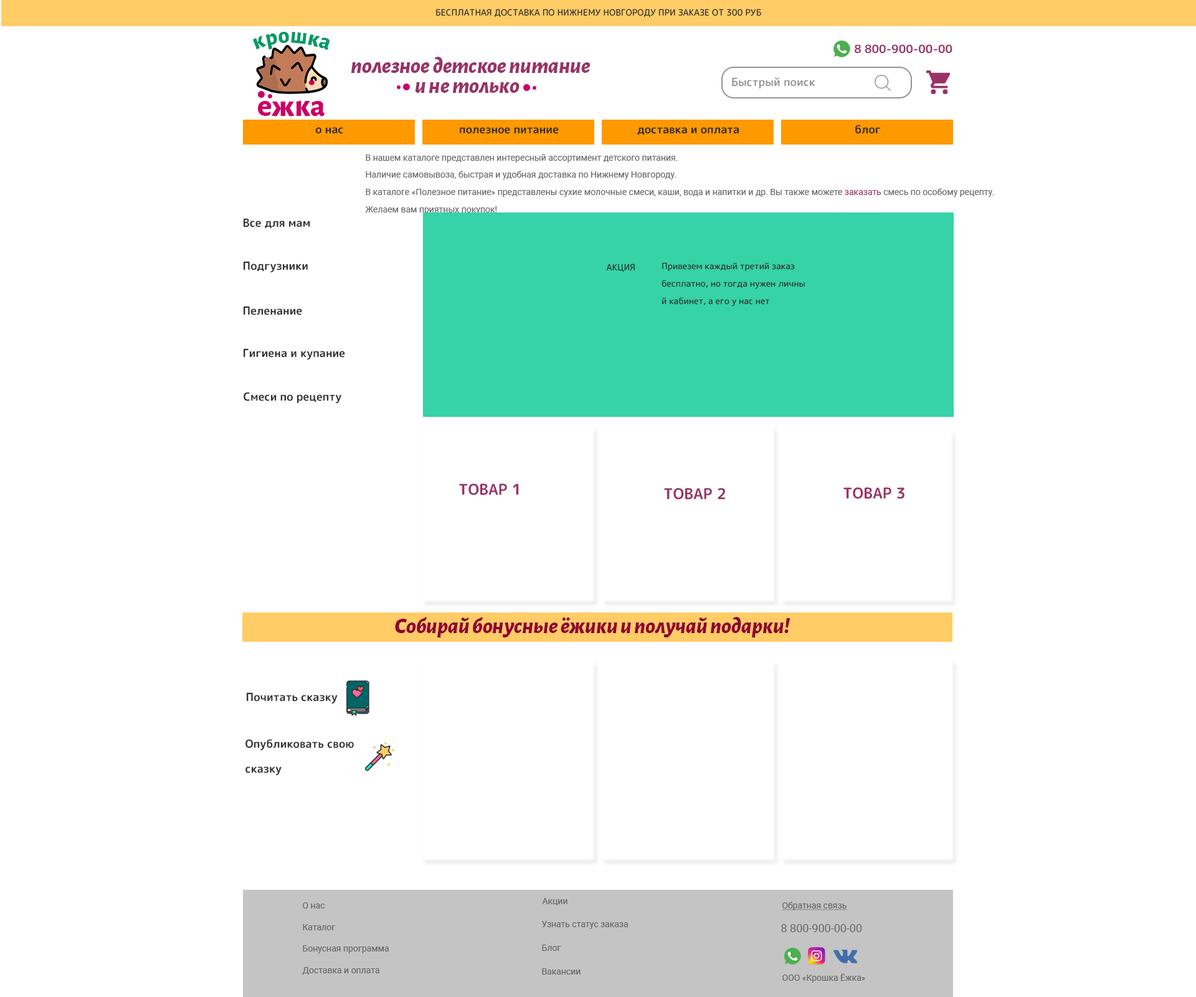
<style>
.page{position:relative;width:1196px;height:997px;background:#ffffff}
.page>*{position:absolute;margin:0}
.t1{font:8.7px "RoundedMplus1c-Medium";color:#333333}
.t2{font:22.9px "AlegreyaSans-ExtraBold";color:#009966}
.t3{font:11.2px "RoundedMplus1c-Bold";color:#993366}
.t4{font:22.4px "AlegreyaSans-ExtraBoldItalic";color:#993366}
.t5{font:11.2px "RoundedMplus1c-Bold";color:#999999}
.t6{font:30.8px "AlegreyaSans-ExtraBold";color:#cc0066}
.t7{font:11.2px "RoundedMplus1c-Bold";color:#302e2e}
.t8{font:8.7px/17.4px "Roboto-Regular";color:#666666}
.t9{font:8.7px/17.4px "Roboto-Regular";color:#993366}
.t10{font:11.2px "RoundedMplus1c-Bold";color:#333333}
.t11{font:8.7px/17.4px "RoundedMplus1c-Medium";color:#333333}
.t12{font:15px "RoundedMplus1c-Bold";color:#993366}
.t13{font:22.4px "AlegreyaSans-ExtraBoldItalic";color:#900035}
.t14{font:11.2px/24.9px "RoundedMplus1c-Bold";color:#333333}
.t15{font:8.7px "Roboto-Regular";color:#666666}
.t16{font:8.7px "Roboto-Regular";color:#666666;text-decoration:underline}
.t17{font:11.2px "Roboto-Regular";color:#666666}
</style>
<div class="page">
<p class="t1" style="left:436px;top:9px;width:325px;height:8px">БЕСПЛАТНАЯ ДОСТАВКА ПО НИЖНЕМУ НОВГОРОДУ ПРИ ЗАКАЗЕ ОТ 300 РУБ</p>
<p class="t2" style="left:253px;top:32px;width:77px;height:18px">крошка</p>
<p class="t3" style="left:855px;top:44px;width:98px;height:10px">8 800-900-00-00</p>
<p class="t4" style="left:351px;top:57px;width:240px;height:17px">полезное детское питание</p>
<p class="t5" style="left:732px;top:77px;width:83px;height:11px">Быстрый поиск</p>
<p class="t4" style="left:415px;top:82px;width:105px;height:11px">и не только</p>
<p class="t6" style="left:258px;top:101px;width:67px;height:16px">ежка</p>
<p class="t7" style="left:855px;top:125px;width:26px;height:9px">блог</p>
<p class="t7" style="left:315px;top:127px;width:28px;height:7px">о нас</p>
<p class="t7" style="left:460px;top:127px;width:99px;height:7px">полезное питание</p>
<p class="t7" style="left:637px;top:127px;width:102px;height:8px">доставка и оплата</p>
<p class="t8" style="left:365px;top:154px;width:629px;height:60px">В нашем каталоге представлен интересный ассортимент детского питания.<br>Наличие самовывоза, быстрая и удобная доставка по Нижнему Новгороду.<br>В каталоге «Полезное питание» представлены сухие молочные смеси, каши, вода и напитки и др. Вы также можете <span class="t9">заказать</span> смесь по особому рецепту.<br>Желаем вам приятных покупок!</p>
<p class="t10" style="left:244px;top:218px;width:66px;height:11px">Все для мам</p>
<p class="t10" style="left:244px;top:261px;width:64px;height:11px">Подгузники</p>
<p class="t1" style="left:607px;top:264px;width:28px;height:8px">АКЦИЯ</p>
<p class="t11" style="left:662px;top:262px;width:143px;height:45px">Привезем каждый третий заказ<br>бесплатно, но тогда нужен личный кабинет, а его у нас нет</p>
<p class="t10" style="left:244px;top:306px;width:58px;height:9px">Пеленание</p>
<p class="t10" style="left:244px;top:348px;width:101px;height:11px">Гигиена и купание</p>
<p class="t10" style="left:244px;top:392px;width:97px;height:11px">Смеси по рецепту</p>
<p class="t12" style="left:459px;top:483px;width:60px;height:12px">ТОВАР 1</p>
<p class="t12" style="left:664px;top:488px;width:61px;height:12px">ТОВАР 2</p>
<p class="t12" style="left:844px;top:487px;width:61px;height:12px">ТОВАР 3</p>
<p class="t13" style="left:395px;top:617px;width:396px;height:20px">Собирай бонусные ёжики и получай подарки!</p>
<p class="t10" style="left:247px;top:692px;width:91px;height:11px">Почитать сказку</p>
<p class="t14" style="left:245px;top:739px;width:109px;height:36px">Опубликовать свою<br>сказку</p>
<p class="t15" style="left:303px;top:902px;width:22px;height:6px">О нас</p>
<p class="t15" style="left:542px;top:898px;width:26px;height:7px">Акции</p>
<p class="t16" style="left:782px;top:902px;width:65px;height:8px">Обратная связь</p>
<p class="t15" style="left:303px;top:924px;width:33px;height:6px">Каталог</p>
<p class="t15" style="left:541px;top:921px;width:87px;height:8px">Узнать статус заказа</p>
<p class="t17" style="left:781px;top:924px;width:81px;height:8px">8 800-900-00-00</p>
<p class="t15" style="left:303px;top:945px;width:86px;height:8px">Бонусная программа</p>
<p class="t15" style="left:542px;top:945px;width:19px;height:6px">Блог</p>
<p class="t15" style="left:302px;top:967px;width:77px;height:7px">Доставка и оплата</p>
<p class="t15" style="left:542px;top:968px;width:39px;height:6px">Вакансии</p>
<p class="t15" style="left:783px;top:973px;width:82px;height:10px">ООО «Крошка Ёжка»</p>
</div>
